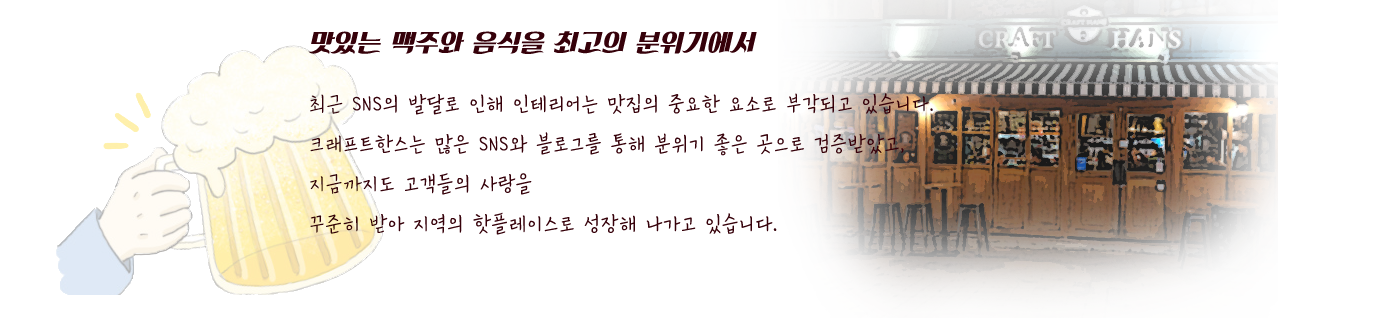
<style>
.page{position:relative;width:1398px;height:318px;background:#ffffff}
.page>*{position:absolute;margin:0}
.t1{font:24px "KoreanPDSR-R";color:#36010a}
.t2{font:28px/40px "KoreanSNRO-R";color:#36010a}
</style>
<div class="page">
<p class="t1" style="left:308px;top:31px;width:449px;height:23px">맛있는 맥주와 음식을 최고의 분위기에서</p>
<p class="t2" style="left:310px;top:93px;width:623px;height:142px">최근 SNS의 발달로 인해 인테리어는 맛집의 중요한 요소로 부각되고 있습니다.<br>크래프트한스는 많은 SNS와 블로그를 통해 분위기 좋은 곳으로 검증받았고, <br>지금까지도 고객들의 사랑을<br>꾸준히 받아 지역의 핫플레이스로 성장해 나가고 있습니다.</p>
</div>
